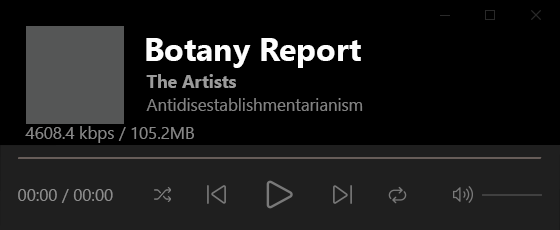
<style>
.page{position:relative;width:560px;height:230px;background:#000000}
.page>*{position:absolute;margin:0}
.t1{font:32px "SegoeUI-Bold";color:#fdfdfd}
.t2{font:17.7px "SegoeUI-Bold";color:#9b9b9b}
.t3{font:16.8px "SegoeUI";color:#828282}
.t4{font:16.8px "SegoeUI";color:#878787}
.t5{font:16.8px "SegoeUI";color:#8e8e8e}
</style>
<div class="page">
<p class="t1" style="left:146px;top:38px;width:215px;height:30px">Botany Report</p>
<p class="t2" style="left:146px;top:74px;width:90px;height:14px">The Artists</p>
<p class="t3" style="left:146px;top:98px;width:217px;height:13px">Antidisestablishmentarianism</p>
<p class="t4" style="left:25px;top:126px;width:169px;height:17px">4608.4 kbps / 105.2MB</p>
<p class="t5" style="left:18px;top:189px;width:95px;height:14px">00:00 / 00:00</p>
</div>
